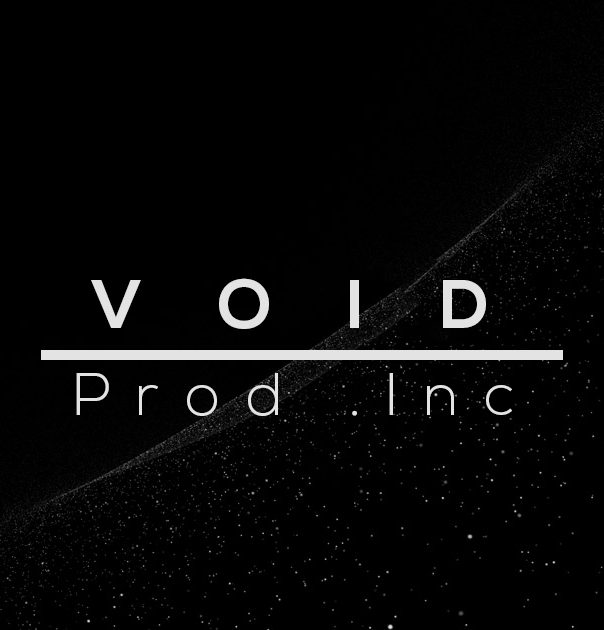
<style>
.page{position:relative;width:604px;height:630px;background:#000000}
.page>*{position:absolute;margin:0}
.t1{font:69.1px "NexaBold";letter-spacing:1.081em;color:#e3e3e3}
.t2{font:60px "NexaLight";letter-spacing:0.421em;color:#e3e3e3}
</style>
<div class="page">
<p class="t1" style="left:91px;top:278px;width:395px;height:51px">VOID</p>
<p class="t2" style="left:76px;top:373px;width:436px;height:43px">Prod .Inc</p>
</div>
